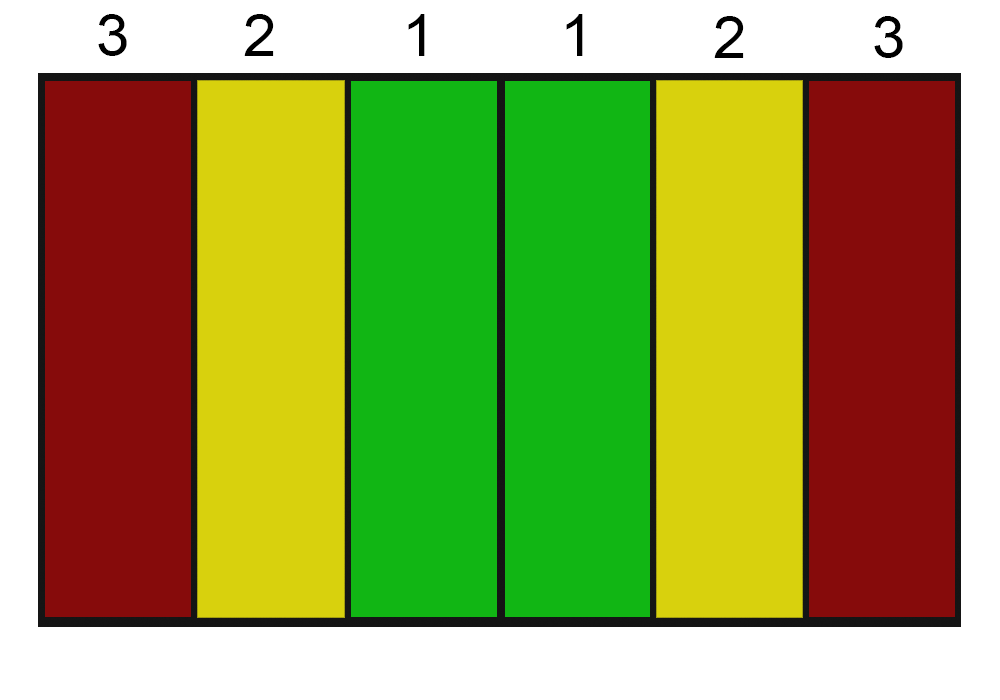
<style>
.page{position:relative;width:1000px;height:700px;background:#ffffff}
.page>*{position:absolute;margin:0}
.t1{font:60px "ArialMT";color:#000000}
</style>
<div class="page">
<p class="t1" style="left:98px;top:14px;width:29px;height:42px">3</p>
<p class="t1" style="left:244px;top:14px;width:30px;height:42px">2</p>
<p class="t1" style="left:408px;top:14px;width:17px;height:42px">1</p>
<p class="t1" style="left:566px;top:14px;width:17px;height:42px">1</p>
<p class="t1" style="left:714px;top:16px;width:30px;height:42px">2</p>
<p class="t1" style="left:874px;top:16px;width:29px;height:42px">3</p>
</div>
